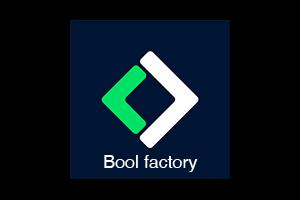
<style>
.page{position:relative;width:300px;height:200px;background:#000000}
.page>*{position:absolute;margin:0}
.t1{font:17.8px "Helvetica";color:#ffffff}
</style>
<div class="page">
<p class="t1" style="left:104px;top:155px;width:94px;height:17px">Bool factory</p>
</div>
